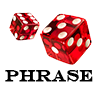
<style>
.page{position:relative;width:96px;height:96px;background:#ffffff}
.page>*{position:absolute;margin:0}
.t1{font:16px "EngraversMT";color:#000000;font-weight:bold}
</style>
<div class="page">
<p class="t1" style="left:5px;top:70px;width:88px;height:12px">phrase</p>
</div>
